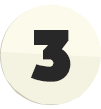
<style>
.page{position:relative;width:101px;height:109px;background:#fcfbeb}
.page>*{position:absolute;margin:0}
.t1{font:72px "MovaviGrotesqueBlack";color:#282828}
</style>
<div class="page">
<p class="t1" style="left:31px;top:30px;width:40px;height:52px">3</p>
</div>
